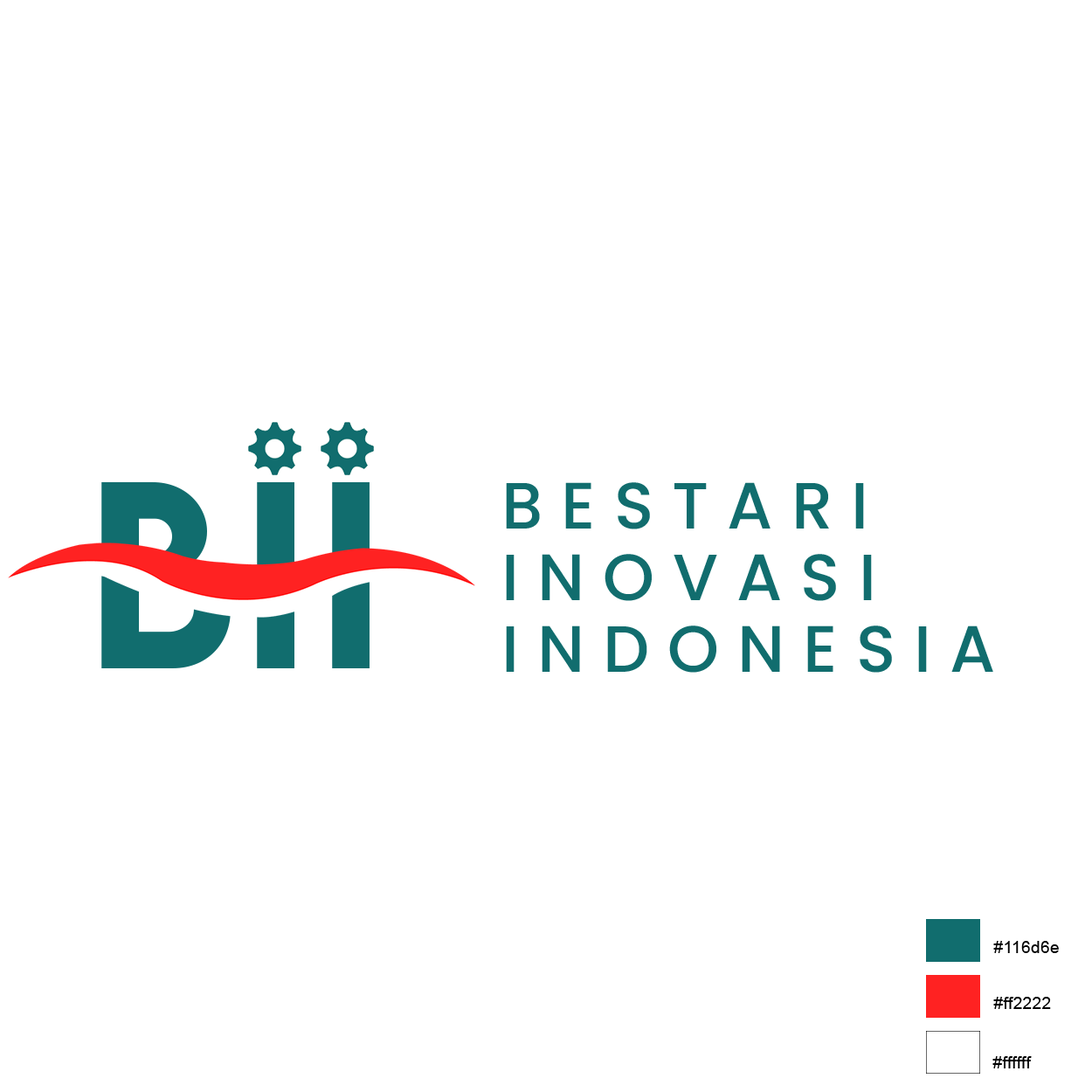
<style>
.page{position:relative;width:1092px;height:1092px;background:#ffffff}
.page>*{position:absolute;margin:0}
.t1{font:236.6px "LEMONMILK-Medium";letter-spacing:0.025em;color:#116d6e}
.t2{font:65.5px/71.6px "Poppins-Medium";letter-spacing:0.28em;color:#116d6e}
.t3{font:16.4px "ArialMT";letter-spacing:0.025em;color:#000000}
</style>
<div class="page">
<p class="t1" style="left:101px;top:481px;width:269px;height:187px">BII</p>
<p class="t2" style="left:506px;top:482px;width:487px;height:191px">BESTARI<br>INOVASI<br>INDONESIA</p>
<p class="t3" style="left:993px;top:941px;width:66px;height:12px">#116d6e</p>
<p class="t3" style="left:993px;top:997px;width:58px;height:12px">#ff2222</p>
<p class="t3" style="left:992px;top:1056px;width:40px;height:12px">#ffffff</p>
</div>
